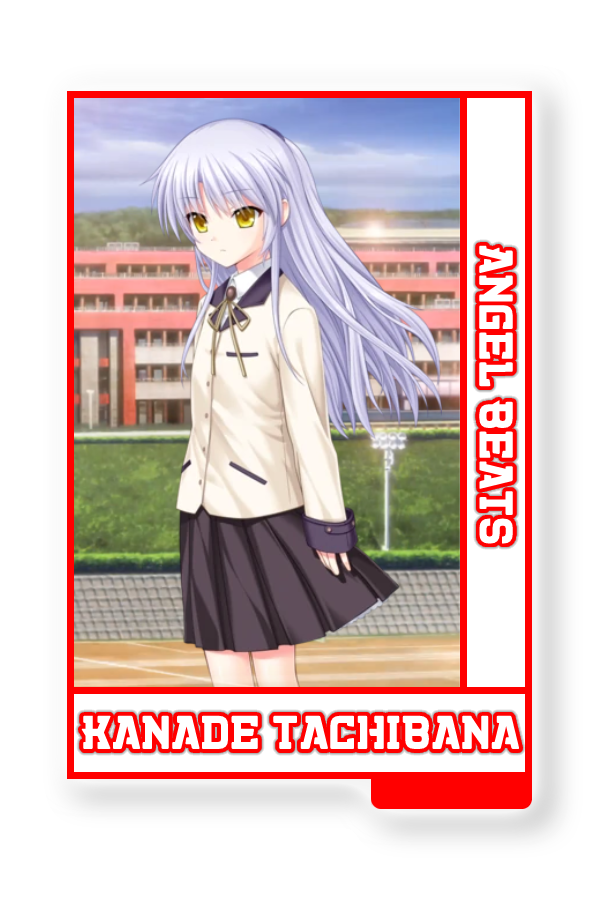
<style>
.page{position:relative;width:600px;height:900px;background:#ffffff}
.page>*{position:absolute;margin:0}
.t1{font:48.8px "KillerCollege";color:#ffffff}
.t2{font:48.6px "KillerCollege";color:#ffffff}
</style>
<div class="page">
<p class="t1" style="left:479px;top:245px;width:34px;height:299px;rotate:90deg">Angel Beats</p>
<p class="t2" style="left:81px;top:715px;width:438px;height:34px">Kanade tachibana</p>
</div>
